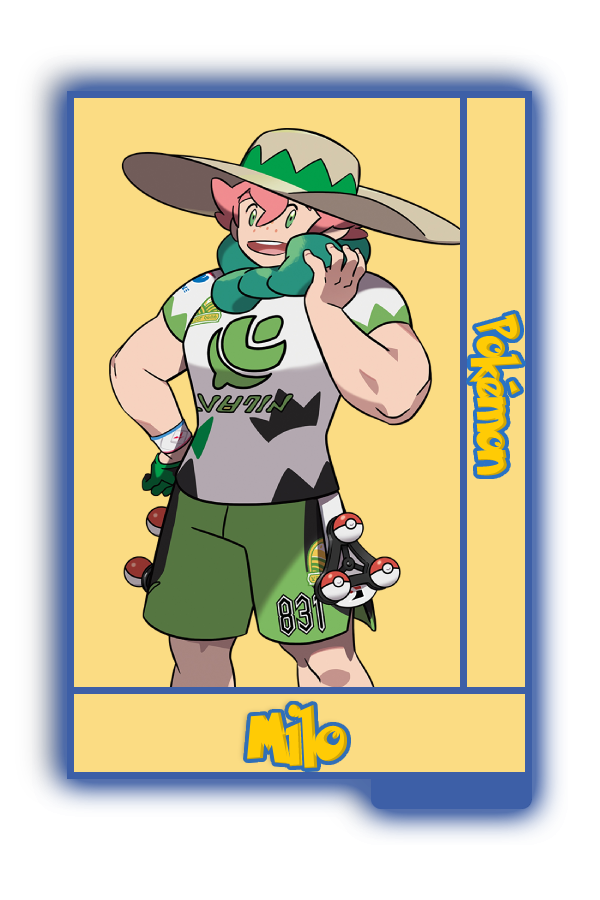
<style>
.page{position:relative;width:600px;height:900px;background:#fbdc83}
.page>*{position:absolute;margin:0}
.t1{font:48.8px "PokemonSolidNormal";color:#ffcb05;scale:0.8 1}
.t2{font:60.1px "PokemonSolidNormal";color:#ffcb05;scale:0.96 1}
</style>
<div class="page">
<p class="t1" style="left:469px;top:313px;width:54px;height:163px;rotate:90deg">Pokémon</p>
<p class="t2" style="left:247px;top:704px;width:101px;height:65px">Milo</p>
</div>
